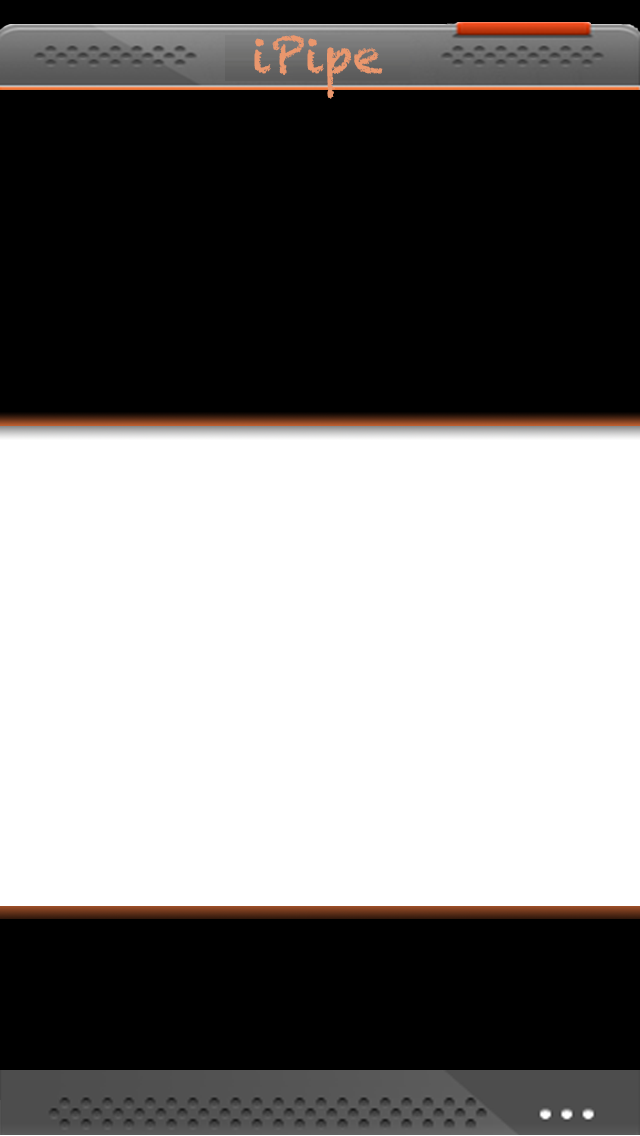
<style>
.page{position:relative;width:640px;height:1136px;background:#000000}
.page>*{position:absolute;margin:0}
.t1{font:48px "Chalkduster";color:#ea976d}
</style>
<div class="page">
<p class="t1" style="left:254px;top:35px;width:129px;height:64px">iPipe</p>
</div>
